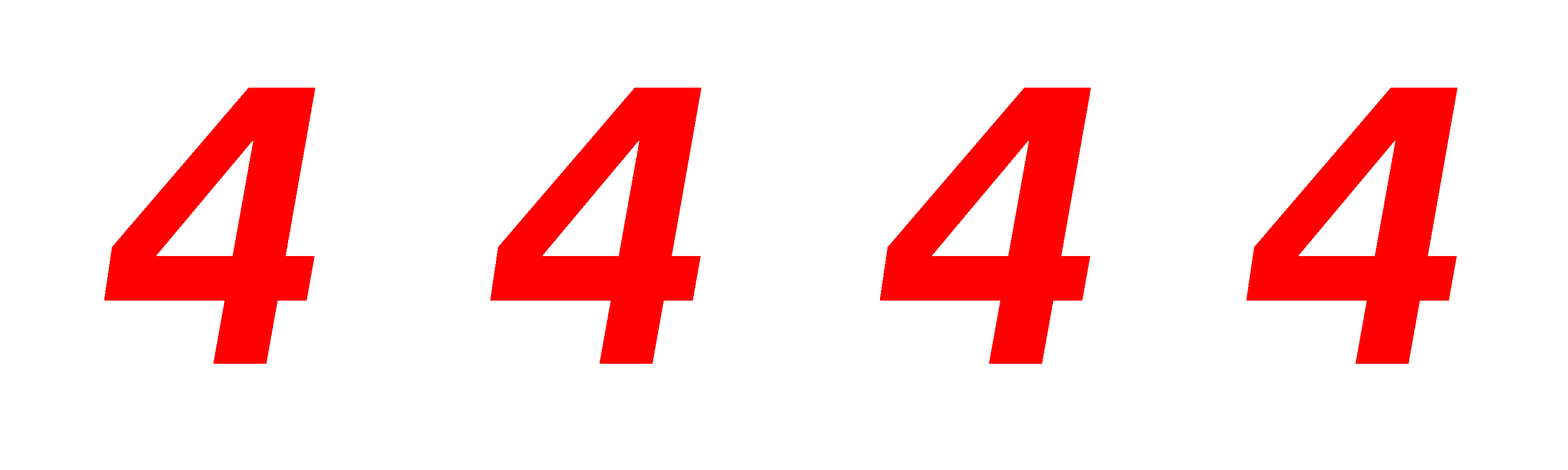
<style>
.page{position:relative;width:1568px;height:470px;background:#ffffff}
.page>*{position:absolute;margin:0}
.t1{font:392px "HelveticaLTStd-BoldObl";color:#ff0000}
</style>
<div class="page">
<p class="t1" style="left:104px;top:88px;width:211px;height:276px">4</p>
<p class="t1" style="left:490px;top:88px;width:211px;height:276px">4</p>
<p class="t1" style="left:880px;top:88px;width:211px;height:276px">4</p>
<p class="t1" style="left:1247px;top:88px;width:210px;height:276px">4</p>
</div>
